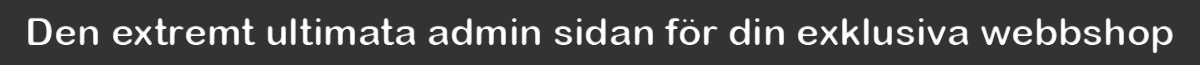
<style>
.page{position:relative;width:1200px;height:65px;background:#333333}
.page>*{position:absolute;margin:0}
.t1{font:39px "ArialRoundedMTBold";color:#ffffff}
</style>
<div class="page">
<p class="t1" style="left:28px;top:17px;width:1145px;height:36px">Den extremt ultimata admin sidan för din exklusiva webbshop</p>
</div>
